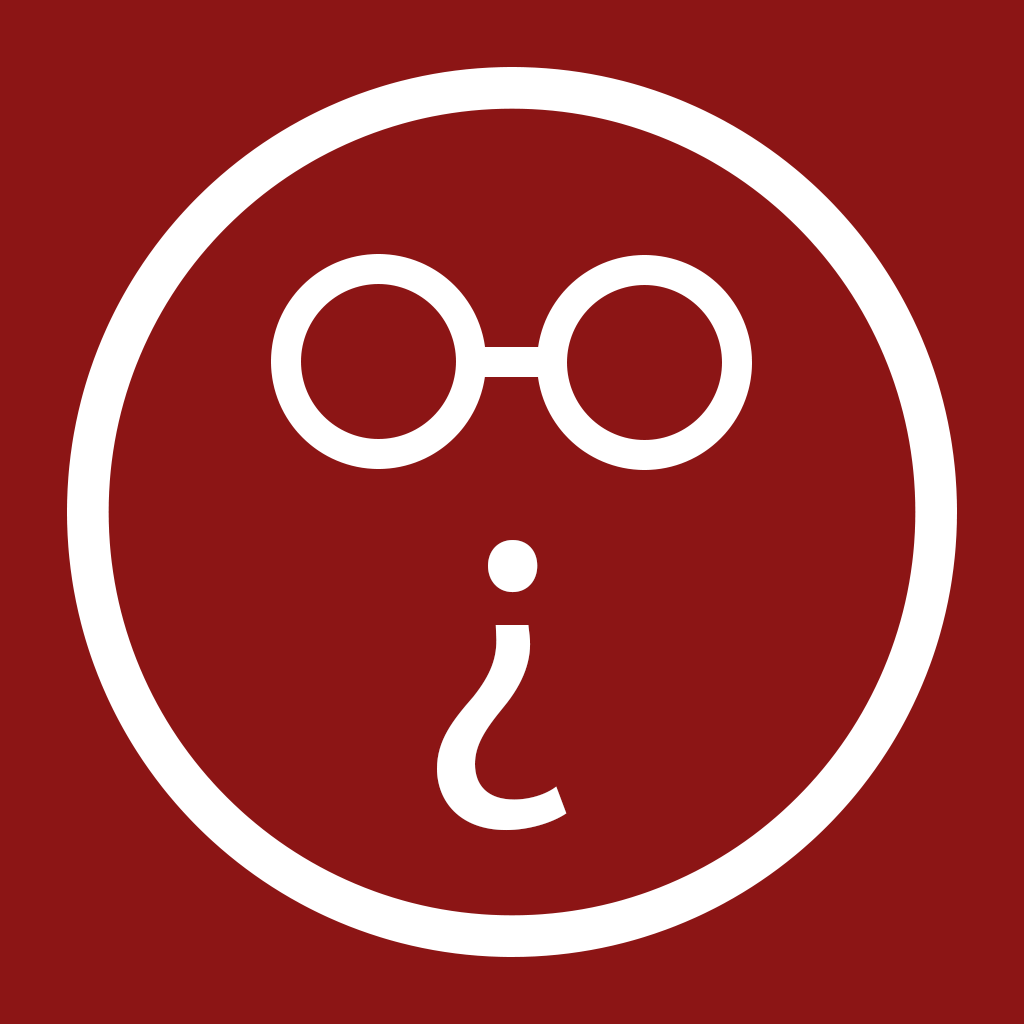
<style>
.page{position:relative;width:1024px;height:1024px;background:#8c1515}
.page>*{position:absolute;margin:0}
.t1{font:416.7px "MyriadPro-Regular";color:#ffffff}
</style>
<div class="page">
<p class="t1" style="left:437px;top:540px;width:130px;height:291px">¿</p>
</div>
